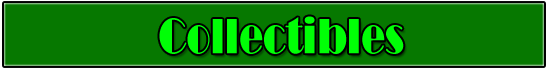
<style>
.page{position:relative;width:547px;height:69px;background:#067800}
.page>*{position:absolute;margin:0}
.t1{font:51.4px "Broadway";color:#00ff06;scale:0.77 1}
</style>
<div class="page">
<p class="t1" style="left:159px;top:16px;width:245px;height:38px">Collectibles</p>
</div>
